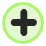
<style>
.page{position:relative;width:46px;height:46px;background:#ffffff}
.page>*{position:absolute;margin:0}
.t1{font:58.3px "OCRAExtended";color:#272727}
</style>
<div class="page">
<p class="t1" style="left:11px;top:10px;width:25px;height:25px">+</p>
</div>
